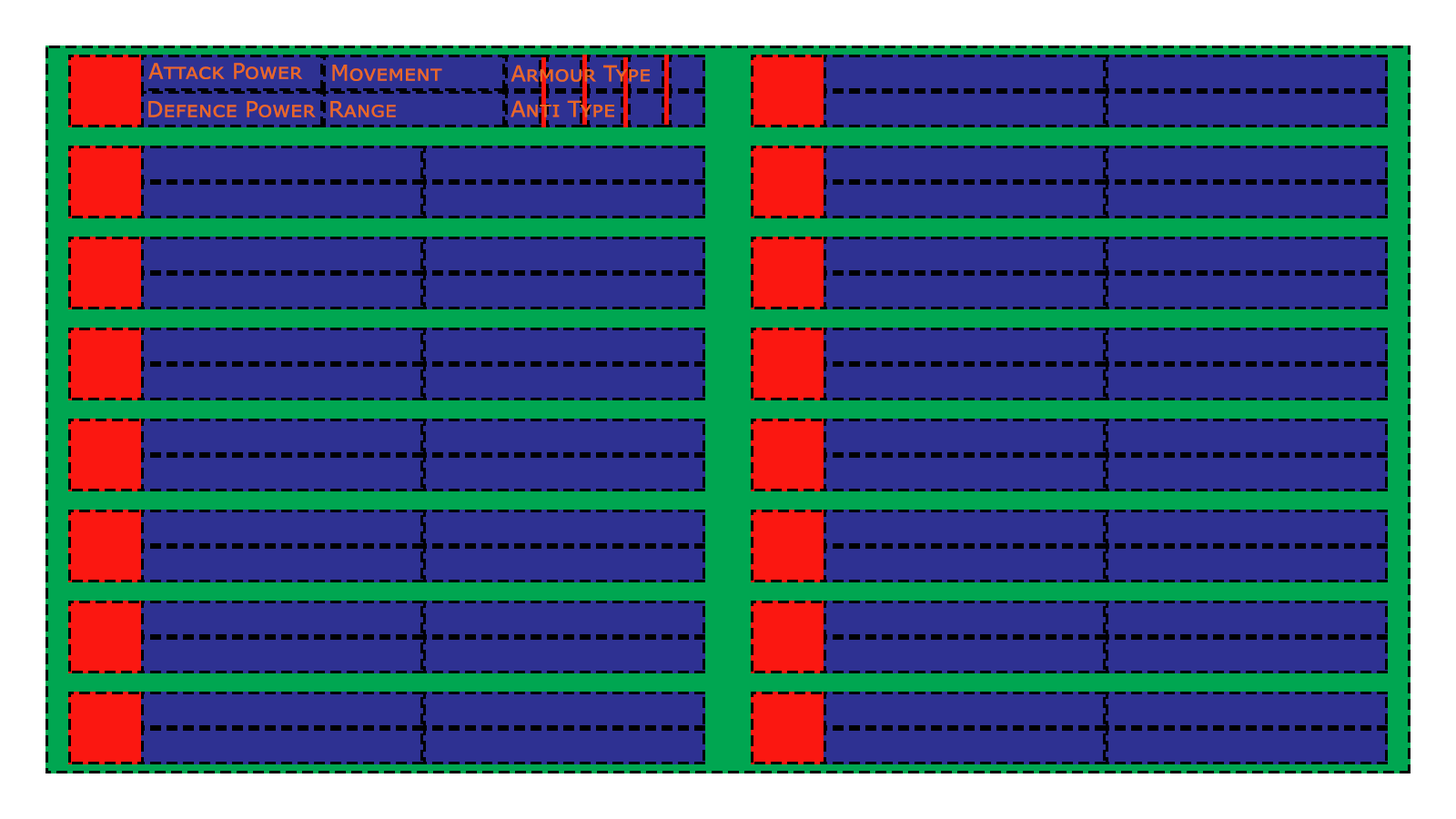
<style>
.page{position:relative;width:1456px;height:819px;background:#2e3192}
.page>*{position:absolute;margin:0}
.t1{font:21.8px "Verdana";letter-spacing:-0.005em;color:#ea6824;font-variant:small-caps}
</style>
<div class="page">
<p class="t1" style="left:148px;top:63px;width:155px;height:16px">Attack Power</p>
<p class="t1" style="left:332px;top:65px;width:110px;height:16px">Movement</p>
<p class="t1" style="left:511px;top:65px;width:139px;height:17px">Armour Type</p>
<p class="t1" style="left:148px;top:101px;width:168px;height:16px">Defence Power</p>
<p class="t1" style="left:330px;top:101px;width:66px;height:16px">Range</p>
<p class="t1" style="left:511px;top:100px;width:103px;height:17px">Anti Type</p>
</div>
